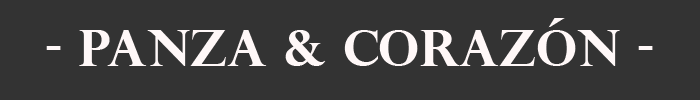
<style>
.page{position:relative;width:700px;height:100px;background:#333333}
.page>*{position:absolute;margin:0}
.t1{font:50px "PerpetuaTitlingMT-Bold";color:#fff8f8}
</style>
<div class="page">
<p class="t1" style="left:46px;top:18px;width:607px;height:48px">- Panza &amp; Corazón -</p>
</div>
